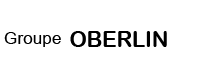
<style>
.page{position:relative;width:210px;height:70px;background:#ffffff}
.page>*{position:absolute;margin:0}
.t1{font:17.2px "ArialMT";color:#000000}
.t2{font:21.5px "ArialRoundedMTBold";color:#000000}
</style>
<div class="page">
<p class="t1" style="left:4px;top:32px;width:57px;height:15px">Groupe</p>
<p class="t2" style="left:70px;top:31px;width:97px;height:16px">OBERLIN</p>
</div>
